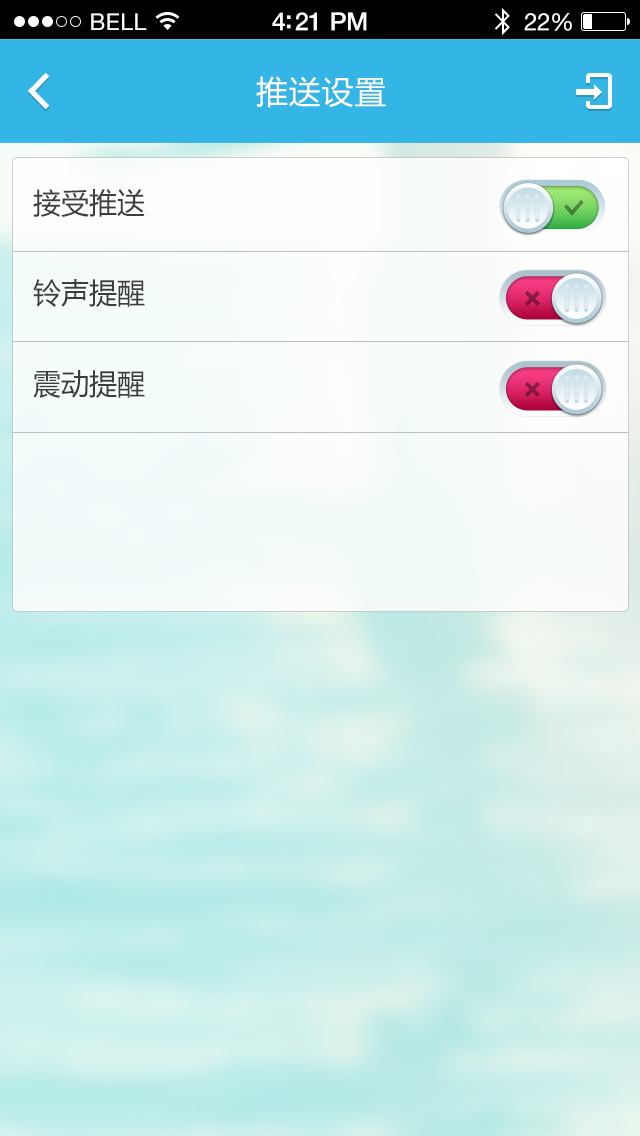
<style>
.page{position:relative;width:640px;height:1136px}
.page>*{position:absolute;margin:0}
.t1{font:23px "HelveticaNeue";letter-spacing:0.02em;color:#ffffff}
.t2{font:25px "HelveticaNeue-Medium";letter-spacing:-0.02em;color:#ffffff}
.t3{font:24px "HelveticaNeue";letter-spacing:-0.02em;color:#ffffff}
.t4{font:31.7px "MicrosoftYaHei";letter-spacing:0.025em;color:#ffffff}
.t5{font:28.8px "MicrosoftYaHei";color:#3d3d3d}
</style>
<div class="page">
<p class="t1" style="left:91px;top:13px;width:56px;height:17px">BELL</p>
<p class="t2" style="left:272px;top:12px;width:95px;height:19px">4:21 PM</p>
<p class="t3" style="left:524px;top:13px;width:48px;height:18px">22%</p>
<p class="t4" style="left:256px;top:76px;width:130px;height:32px">推送设置</p>
<p class="t5" style="left:33px;top:189px;width:112px;height:28px">接受推送</p>
<p class="t5" style="left:33px;top:279px;width:112px;height:28px">铃声提醒</p>
<p class="t5" style="left:33px;top:370px;width:112px;height:28px">震动提醒</p>
</div>
